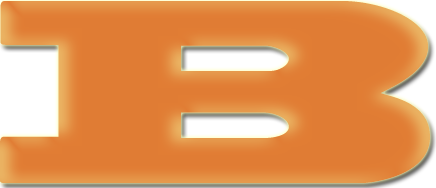
<style>
.page{position:relative;width:436px;height:188px;background:#e07c34}
.page>*{position:absolute;margin:0}
.t1{font:242.2px "BlackoakStd";color:#e17d34}
</style>
<div class="page">
<p class="t1" style="left:0px;top:1px;width:430px;height:182px">B</p>
</div>
